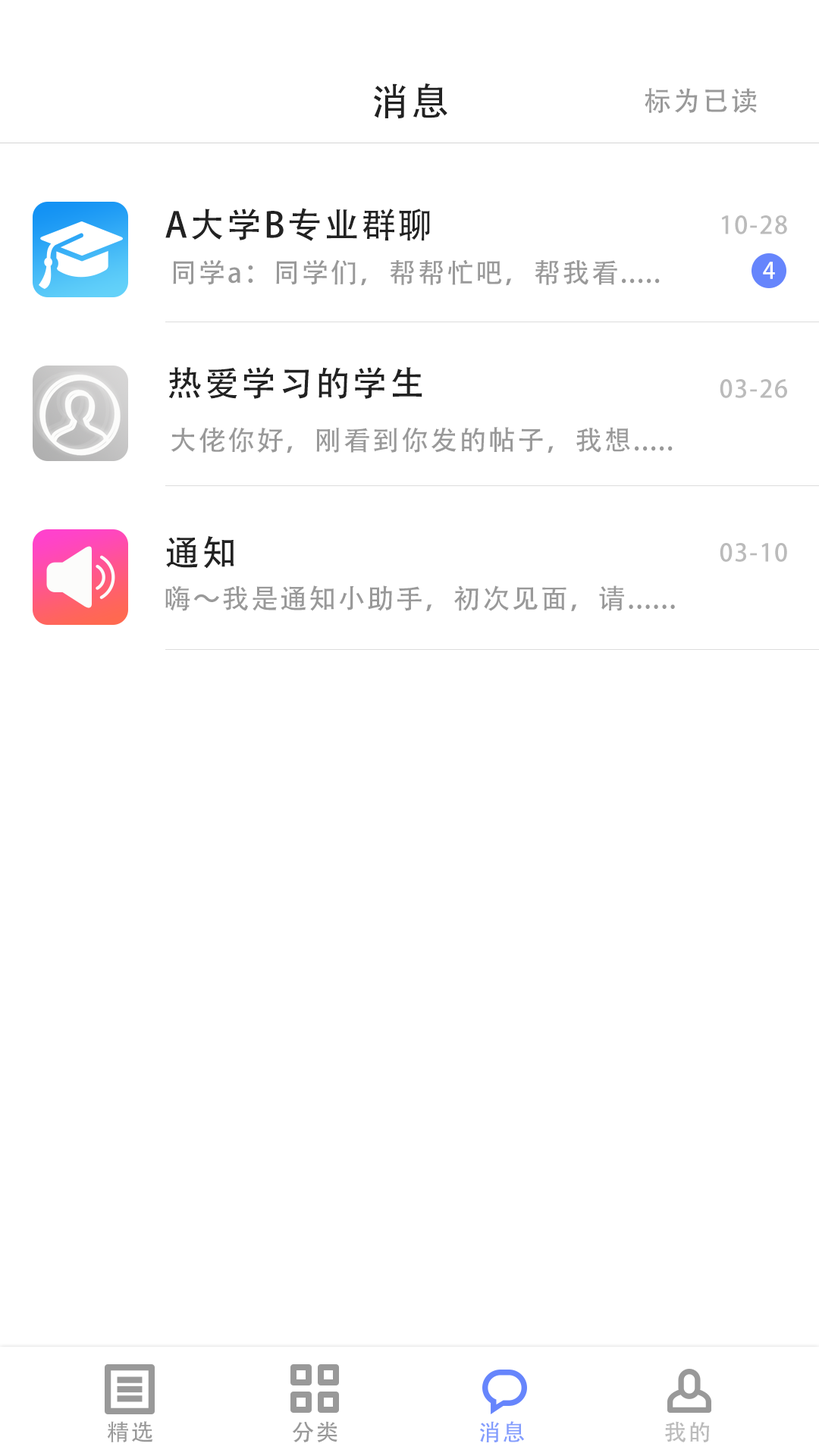
<style>
.page{position:relative;width:819px;height:1456px;background:#ffffff}
.page>*{position:absolute;margin:0}
.t1{font:37.9px "AdobeHeitiStd-Regular";letter-spacing:0.06em;color:#222222}
.t2{font:27.3px "AdobeHeitiStd-Regular";letter-spacing:0.06em;color:#999999}
.t3{font:34.9px "AdobeHeitiStd-Regular";letter-spacing:0.06em;color:#222222}
.t4{font:24.3px "AdobeHeitiStd-Regular";letter-spacing:0.06em;color:#bbbbbb}
.t5{font:22.7px "AdobeHeitiStd-Regular";letter-spacing:0.06em;color:#ffffff}
.t6{font:22.7px "AdobeHeitiStd-Regular";letter-spacing:0.06em;color:#999999}
.t7{font:22.7px "AdobeHeitiStd-Regular";letter-spacing:0.06em;color:#839dfd}
.t8{font:22.7px "AdobeHeitiStd-Regular";letter-spacing:0.06em;color:#bbbbbb}
</style>
<div class="page">
<p class="t1" style="left:374px;top:83px;width:73px;height:36px">消息</p>
<p class="t2" style="left:645px;top:88px;width:112px;height:26px">标为已读</p>
<p class="t3" style="left:165px;top:208px;width:265px;height:33px">A大学B专业群聊</p>
<p class="t4" style="left:721px;top:215px;width:66px;height:19px">10-28</p>
<p class="t2" style="left:173px;top:259px;width:487px;height:27px">同学a：同学们，帮帮忙吧，帮我看.....</p>
<p class="t5" style="left:763px;top:262px;width:12px;height:17px">4</p>
<p class="t3" style="left:168px;top:367px;width:254px;height:32px">热爱学习的学生</p>
<p class="t4" style="left:720px;top:379px;width:67px;height:19px">03-26</p>
<p class="t2" style="left:171px;top:427px;width:502px;height:26px">大佬你好，刚看到你发的帖子，我想.....</p>
<p class="t3" style="left:166px;top:535px;width:68px;height:34px">通知</p>
<p class="t4" style="left:720px;top:543px;width:67px;height:19px">03-10</p>
<p class="t2" style="left:165px;top:585px;width:510px;height:26px">嗨～我是通知小助手，初次见面，请......</p>
<p class="t6" style="left:107px;top:1421px;width:46px;height:21px">精选</p>
<p class="t6" style="left:292px;top:1421px;width:45px;height:21px">分类</p>
<p class="t7" style="left:480px;top:1421px;width:44px;height:21px">消息</p>
<p class="t8" style="left:665px;top:1421px;width:44px;height:21px">我的</p>
</div>
